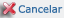
<style>
.page{position:relative;width:64px;height:18px;background:#eff0f1}
.page>*{position:absolute;margin:0}
.t1{font:10px "Verdana";color:#336ca1}
</style>
<div class="page">
<p class="t1" style="left:18px;top:5px;width:45px;height:8px">Cancelar</p>
</div>
